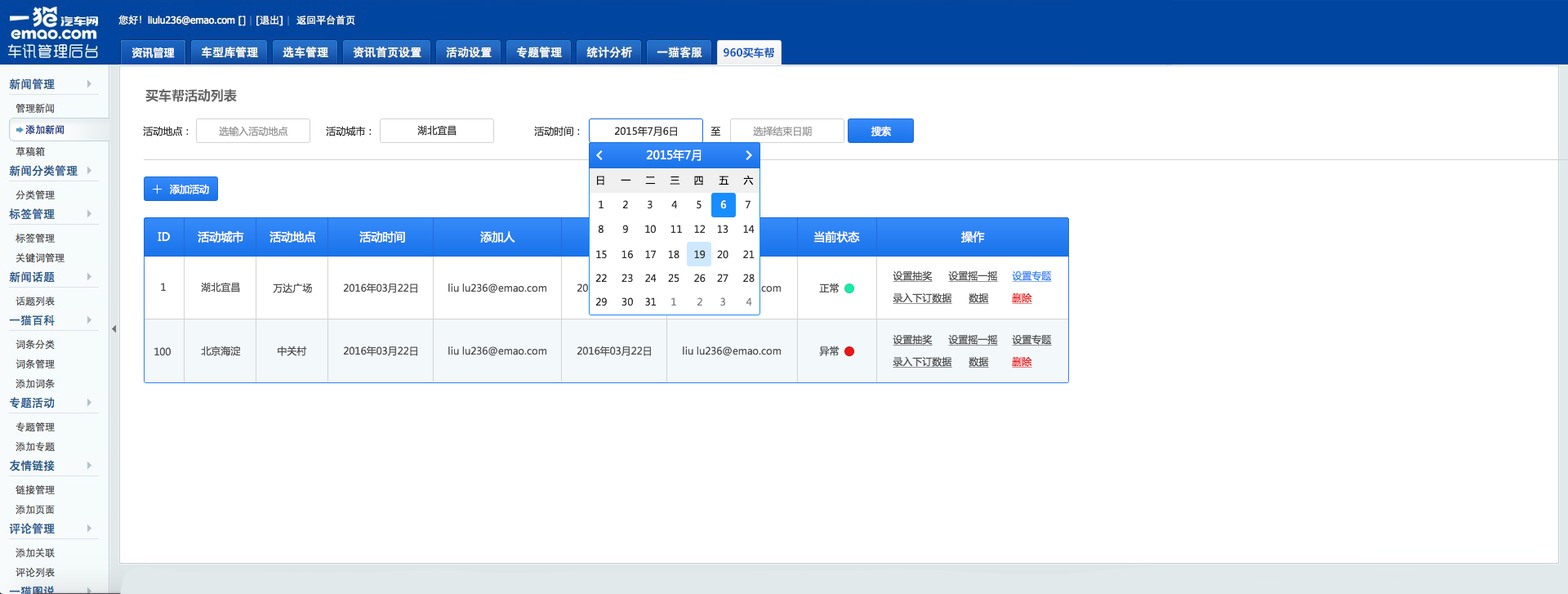
<style>
.page{position:relative;width:1568px;height:594px;background:#ffffff}
.page>*{position:absolute;margin:0}
.t1{font:10.6px "MicrosoftYaHei-Bold";color:#fefefe}
.t2{font:10.6px "MicrosoftYaHei-Bold";color:#175abb}
.t3{font:13.1px "MicrosoftYaHei-Bold";color:#666666}
.t4{font:9.8px "MicrosoftYaHei";color:#333333}
.t5{font:9.8px "MicrosoftYaHei";color:#999999}
.t6{font:9.8px "MicrosoftYaHei";color:#ffffff}
.t7{font:11.4px "MicrosoftYaHei";color:#fefefe}
.t8{font:9.8px "MicrosoftYaHei";color:#000000}
.t9{font:11.4px "MicrosoftYaHei";color:#ffffff}
.t10{font:9.8px "MicrosoftYaHei";color:#535353}
.t11{font:9.8px "MicrosoftYaHei";color:#535353;text-decoration:underline}
.t12{font:9.8px "MicrosoftYaHei";color:#3287f7;text-decoration:underline}
.t13{font:9.8px "MicrosoftYaHei";color:#ec1616;text-decoration:underline}
.t14{font:9.8px "MicrosoftYaHei";color:#888888}
</style>
<div class="page">
<p class="t1" style="left:131px;top:47px;width:44px;height:11px">资讯管理</p>
<p class="t2" style="left:724px;top:47px;width:50px;height:11px">960买车帮</p>
<p class="t3" style="left:145px;top:89px;width:92px;height:13px">买车帮活动列表</p>
<p class="t4" style="left:143px;top:126px;width:46px;height:10px">活动地点：</p>
<p class="t5" style="left:219px;top:126px;width:69px;height:10px">选输入活动地点</p>
<p class="t4" style="left:326px;top:126px;width:46px;height:10px">活动城市：</p>
<p class="t4" style="left:417px;top:125px;width:40px;height:11px">湖北宜昌</p>
<p class="t4" style="left:534px;top:126px;width:46px;height:10px">活动时间：</p>
<p class="t4" style="left:614px;top:126px;width:63px;height:10px">2015年7月6日</p>
<p class="t5" style="left:753px;top:126px;width:59px;height:10px">选择结束日期</p>
<p class="t6" style="left:871px;top:126px;width:20px;height:10px">搜索</p>
<p class="t4" style="left:710px;top:127px;width:11px;height:9px">至</p>
<p class="t7" style="left:646px;top:149px;width:56px;height:12px">2015年7月</p>
<p class="t6" style="left:170px;top:184px;width:39px;height:10px">添加活动</p>
<p class="t8" style="left:597px;top:176px;width:7px;height:9px">日</p>
<p class="t8" style="left:621px;top:179px;width:10px;height:1px">一</p>
<p class="t8" style="left:645px;top:176px;width:11px;height:9px">二</p>
<p class="t8" style="left:670px;top:176px;width:10px;height:9px">三</p>
<p class="t8" style="left:694px;top:176px;width:9px;height:9px">四</p>
<p class="t8" style="left:719px;top:176px;width:10px;height:9px">五</p>
<p class="t8" style="left:743px;top:175px;width:11px;height:10px">六</p>
<p class="t4" style="left:599px;top:200px;width:5px;height:8px">1</p>
<p class="t4" style="left:622px;top:200px;width:6px;height:8px">2</p>
<p class="t4" style="left:648px;top:200px;width:5px;height:9px">3</p>
<p class="t4" style="left:671px;top:200px;width:7px;height:8px">4</p>
<p class="t4" style="left:697px;top:200px;width:5px;height:9px">5</p>
<p class="t6" style="left:720px;top:200px;width:6px;height:9px">6</p>
<p class="t4" style="left:745px;top:200px;width:6px;height:8px">7</p>
<p class="t9" style="left:158px;top:232px;width:12px;height:9px">ID</p>
<p class="t9" style="left:198px;top:230px;width:46px;height:13px">活动城市</p>
<p class="t9" style="left:270px;top:230px;width:46px;height:13px">活动地点</p>
<p class="t9" style="left:359px;top:231px;width:46px;height:12px">活动时间</p>
<p class="t9" style="left:480px;top:231px;width:35px;height:12px">添加人</p>
<p class="t4" style="left:598px;top:225px;width:6px;height:9px">8</p>
<p class="t4" style="left:622px;top:225px;width:6px;height:9px">9</p>
<p class="t4" style="left:645px;top:225px;width:110px;height:9px">10     11    12    13     14</p>
<p class="t9" style="left:813px;top:230px;width:47px;height:13px">当前状态</p>
<p class="t9" style="left:961px;top:231px;width:24px;height:12px">操作</p>
<p class="t4" style="left:596px;top:250px;width:159px;height:9px">15     16    17    18     19    20     21</p>
<p class="t10" style="left:201px;top:282px;width:39px;height:10px">湖北宜昌</p>
<p class="t4" style="left:595px;top:274px;width:160px;height:9px">22     23    24    25     26    27     28</p>
<p class="t11" style="left:893px;top:270px;width:40px;height:12px">设置抽奖</p>
<p class="t11" style="left:948px;top:270px;width:50px;height:12px">设置摇一摇</p>
<p class="t12" style="left:1012px;top:270px;width:40px;height:12px">设置专题</p>
<p class="t10" style="left:161px;top:283px;width:5px;height:8px">1</p>
<p class="t10" style="left:273px;top:283px;width:39px;height:10px">万达广场</p>
<p class="t10" style="left:343px;top:283px;width:74px;height:10px">2016年03月22日</p>
<p class="t10" style="left:448px;top:283px;width:99px;height:10px">liu lu236@emao.com</p>
<p class="t6" style="left:683px;top:283px;width:99px;height:10px">liu lu236@emao.com</p>
<p class="t10" style="left:819px;top:283px;width:20px;height:10px">正常</p>
<p class="t11" style="left:893px;top:292px;width:59px;height:12px">录入下订数据</p>
<p class="t11" style="left:969px;top:292px;width:20px;height:12px">数据</p>
<p class="t13" style="left:1012px;top:292px;width:20px;height:12px">删除</p>
<p class="t4" style="left:595px;top:297px;width:62px;height:9px">29     30    31</p>
<p class="t14" style="left:671px;top:297px;width:81px;height:9px">1       2      3       4</p>
<p class="t11" style="left:893px;top:334px;width:40px;height:11px">设置抽奖</p>
<p class="t11" style="left:948px;top:334px;width:50px;height:11px">设置摇一摇</p>
<p class="t11" style="left:1012px;top:334px;width:40px;height:11px">设置专题</p>
<p class="t10" style="left:154px;top:347px;width:17px;height:9px">100</p>
<p class="t10" style="left:201px;top:345px;width:40px;height:11px">北京海淀</p>
<p class="t10" style="left:278px;top:345px;width:29px;height:11px">中关村</p>
<p class="t10" style="left:343px;top:345px;width:74px;height:11px">2016年03月22日</p>
<p class="t10" style="left:448px;top:346px;width:99px;height:10px">liu lu236@emao.com</p>
<p class="t10" style="left:577px;top:345px;width:74px;height:11px">2016年03月22日</p>
<p class="t10" style="left:683px;top:346px;width:99px;height:10px">liu lu236@emao.com</p>
<p class="t10" style="left:819px;top:345px;width:20px;height:11px">异常</p>
<p class="t11" style="left:893px;top:356px;width:59px;height:12px">录入下订数据</p>
<p class="t11" style="left:969px;top:356px;width:20px;height:12px">数据</p>
<p class="t13" style="left:1012px;top:356px;width:20px;height:12px">删除</p>
</div>
